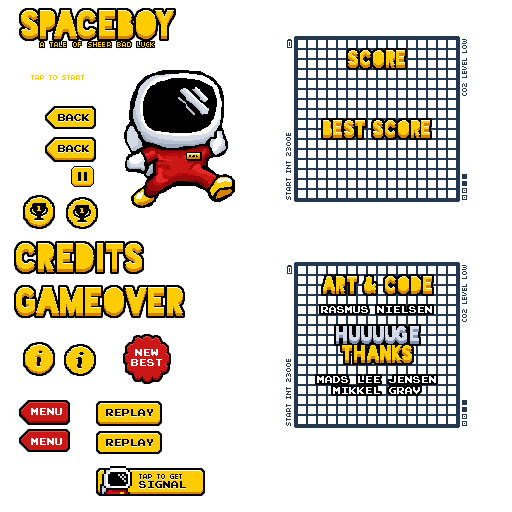
<style>
.page{position:relative;width:512px;height:512px;background:#ffffff}
.page>*{position:absolute;margin:0}
.t1{font:35.2px "Blackout-Midnight";color:#ffcc00}
.t2{font:8px "04b03";color:#23384e;text-transform:uppercase}
.t3{font:20px "Blackout-Midnight"}
.t4{font:20px "Blackout-Midnight";color:#ffcc00}
.t5{font:8px "04b03";color:#ffcc00}
.t6{font:8px "PressStartReg";color:#000000;text-transform:uppercase}
.t7{font:8px "PressStartReg";color:#ffffff;text-transform:uppercase}
.t8{font:20px/19px "Blackout-Midnight"}
.t9{font:20px/19px "Blackout-Midnight";color:#d3dae5}
.t10{font:20px/19px "Blackout-Midnight";color:#ffcc00}
.t11{font:8px/11px "PressStartReg";color:#ffffff;text-transform:uppercase}
.t12{font:8px "04b03";color:#000000}
</style>
<div class="page">
<p class="t1" style="left:21px;top:13px;width:153px;height:26px">spaceboy</p>
<p class="t1" style="left:21px;top:10px;width:153px;height:26px">spaceboy</p>
<p class="t2" style="left:462px;top:39px;width:5px;height:57px;rotate:-90deg">co2 level low</p>
<p class="t3" style="left:348px;top:53px;width:57px;height:15px">score</p>
<p class="t4" style="left:348px;top:50px;width:57px;height:15px">score</p>
<p class="t5" style="left:31px;top:75px;width:53px;height:5px">TAP TO START</p>
<p class="t6" style="left:58px;top:114px;width:31px;height:7px">back</p>
<p class="t3" style="left:323px;top:123px;width:107px;height:15px">best score</p>
<p class="t4" style="left:323px;top:120px;width:107px;height:15px">best score</p>
<p class="t2" style="left:286px;top:133px;width:5px;height:67px;rotate:-90deg">start int 2300e</p>
<p class="t6" style="left:58px;top:145px;width:31px;height:7px">back</p>
<p class="t1" style="left:16px;top:246px;width:126px;height:26px">credits</p>
<p class="t1" style="left:16px;top:243px;width:126px;height:26px">credits</p>
<p class="t2" style="left:462px;top:265px;width:5px;height:57px;rotate:-90deg">co2 level low</p>
<p class="t3" style="left:323px;top:279px;width:109px;height:15px">art &amp; code</p>
<p class="t4" style="left:323px;top:276px;width:109px;height:15px">art &amp; code</p>
<p class="t1" style="left:16px;top:290px;width:167px;height:26px">gameover</p>
<p class="t1" style="left:16px;top:287px;width:167px;height:26px">gameover</p>
<p class="t7" style="left:321px;top:306px;width:111px;height:7px">rasmus nielsen</p>
<p class="t8" style="left:336px;top:329px;width:83px;height:34px;text-align:center">huuuuge<br>thanks</p>
<p class="t9" style="left:336px;top:326px;width:83px;height:34px;text-align:center">huuuuge<br><span class="t10">thanks</span></p>
<p class="t7" style="left:131px;top:349px;width:31px;height:17px;text-align:center">new<br>best</p>
<p class="t2" style="left:286px;top:359px;width:5px;height:67px;rotate:-90deg">start int 2300e</p>
<p class="t11" style="left:317px;top:376px;width:119px;height:18px;text-align:center">mads lee jensen<br>mikkel grav</p>
<p class="t7" style="left:31px;top:408px;width:31px;height:7px">MENU</p>
<p class="t6" style="left:106px;top:409px;width:47px;height:7px">REPLAY</p>
<p class="t7" style="left:31px;top:438px;width:31px;height:7px">MENU</p>
<p class="t6" style="left:106px;top:439px;width:47px;height:7px">REPLAY</p>
<p class="t6" style="left:139px;top:481px;width:47px;height:7px">signal</p>
<p class="t12" style="left:139px;top:474px;width:43px;height:5px">TAP TO GET</p>
</div>
